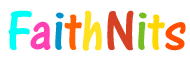
<style>
.page{position:relative;width:190px;height:60px;background:#ffffff}
.page>*{position:absolute;margin:0}
.t1{font:59px "OneStrokeScriptLetPlain";color:#00fff6}
.t2{font:59px "OneStrokeScriptLetPlain";color:#ff41b4}
.t3{font:59px "OneStrokeScriptLetPlain";color:#0094ca}
.t4{font:59px "OneStrokeScriptLetPlain";color:#ff6000}
.t5{font:59px "OneStrokeScriptLetPlain";color:#fee123}
.t6{font:59px "OneStrokeScriptLetPlain";color:#d64123}
.t7{font:59px "OneStrokeScriptLetPlain";color:#76bd22}
.t8{font:59px "OneStrokeScriptLetPlain";color:#ffd700}
.t9{font:59px "OneStrokeScriptLetPlain";color:#ff4e00}
</style>
<div class="page">
<p class="t1" style="left:8px;top:10px;width:178px;height:41px">F<span class="t2">a</span><span class="t3">i</span><span class="t4">t</span><span class="t5">h</span><span class="t6">N</span><span class="t7">i</span><span class="t8">t</span><span class="t9">s</span></p>
</div>
